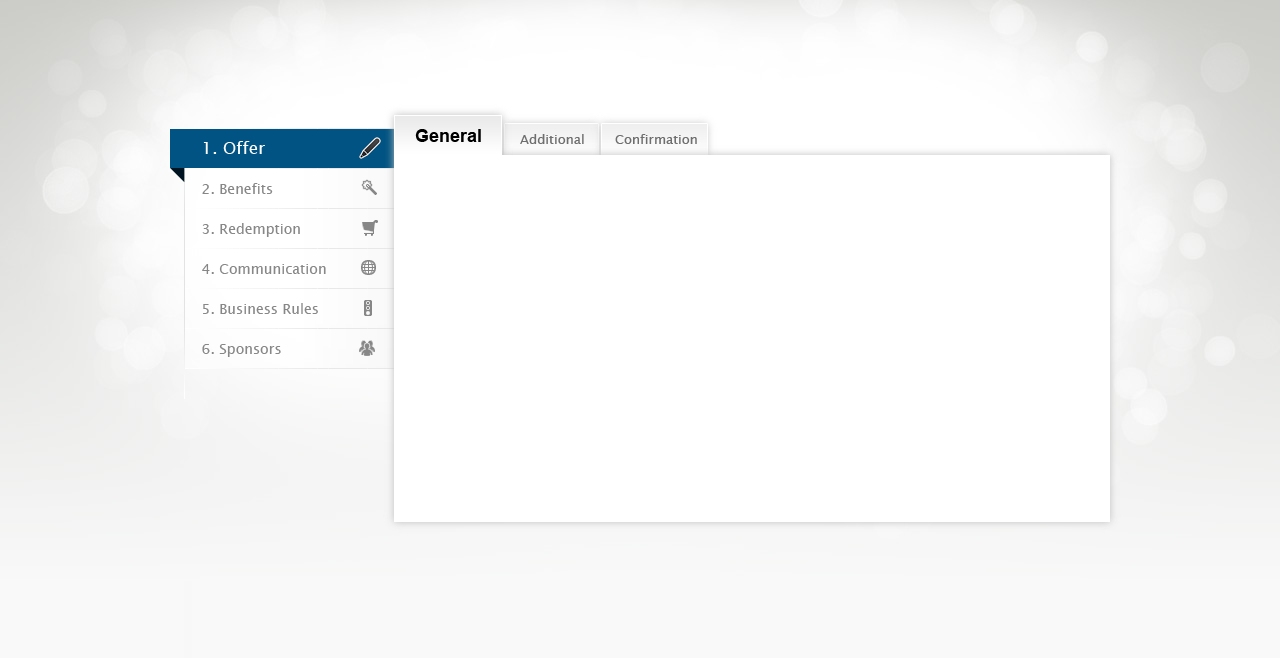
<style>
.page{position:relative;width:1280px;height:658px;background:#ffffff}
.page>*{position:absolute;margin:0}
.t1{font:18px "Arial-BoldMT";color:#000000}
.t2{font:13px "LucidaSansUnicode";color:#6f6f6f}
.t3{font:14px/40px "LucidaSansUnicode";color:#878787}
.t4{font:17px/40px "LucidaSansUnicode";color:#ffffff}
</style>
<div class="page">
<p class="t1" style="left:415px;top:129px;width:66px;height:13px">General</p>
<p class="t2" style="left:520px;top:134px;width:64px;height:10px">Additional</p>
<p class="t2" style="left:615px;top:134px;width:82px;height:10px">Confirmation</p>
<p class="t3" style="left:202px;top:141px;width:124px;height:216px"><span class="t4">1. Offer<br></span>2. Benefits<br>3. Redemption<br>4. Communication<br>5. Business Rules<br>6. Sponsors</p>
</div>
